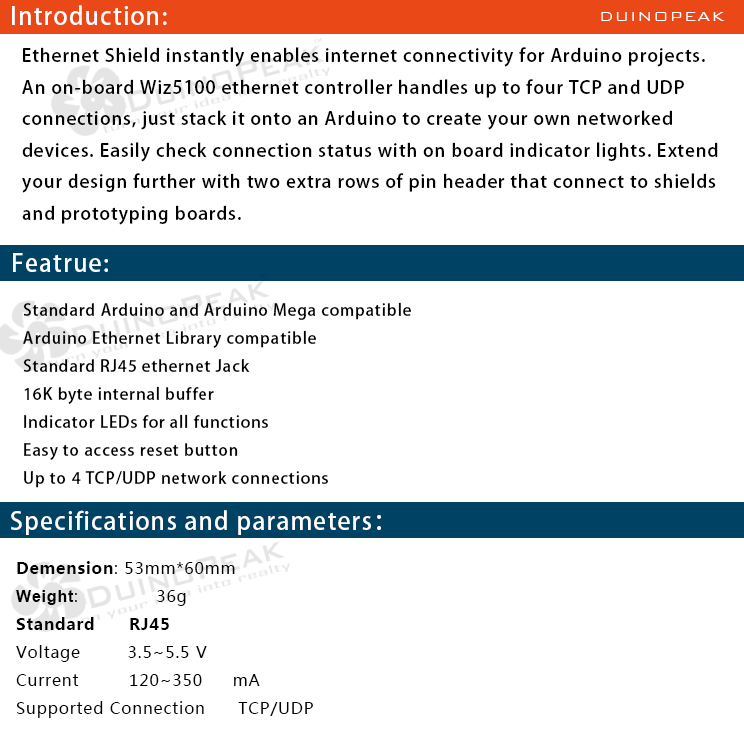
<style>
.page{position:relative;width:744px;height:730px;background:#ffffff}
.page>*{position:absolute;margin:0}
.t1{font:24px "AdobeHeitiStd-Regular";letter-spacing:0.05em;color:#ffffff}
.t2{font:18px "BankGothicBT-Light";letter-spacing:0.05em;color:#ffffff}
.t3{font:18px "AdobeHeitiStd-Regular";letter-spacing:0.05em;color:#000000}
.t4{font:16px "AdobeHeitiStd-Regular";letter-spacing:0.05em;color:#000000}
.t5{font:16px "MicrosoftYaHei";letter-spacing:0.05em;color:#000000}
.t6{font:16px "MicrosoftYaHei-Bold";letter-spacing:0.05em;color:#000000}
.t7{font:16px "Arial-BoldMT";letter-spacing:0.05em;color:#000000}
</style>
<div class="page">
<p class="t1" style="left:12px;top:5px;width:155px;height:20px">Introduction:</p>
<p class="t2" style="left:601px;top:12px;width:124px;height:9px">DUINOPEAK</p>
<p class="t3" style="left:22px;top:47px;width:696px;height:178px">Ethernet Shield instantly enables internet connectivity for Arduino projects. <br>An on-board Wiz5100 ethernet controller handles up to four TCP and UDP <br>connections, just stack it onto an Arduino to create your own networked <br>devices. Easily check connection status with on board indicator lights. Extend <br>your design further with two extra rows of pin header that connect to shields <br>and prototyping boards.</p>
<p class="t1" style="left:13px;top:253px;width:95px;height:19px">Featrue:</p>
<p class="t4" style="left:23px;top:302px;width:388px;height:186px">Standard Arduino and Arduino Mega compatible<br>Arduino Ethernet Library compatible<br>Standard RJ45 ethernet Jack<br>16K byte internal buffer<br>Indicator LEDs for all functions<br>Easy to access reset button<br>Up to 4 TCP/UDP network connections</p>
<p class="t1" style="left:11px;top:510px;width:370px;height:25px">Specifications and parameters：</p>
<p class="t5" style="left:16px;top:561px;width:297px;height:157px"><span class="t6">Demension</span>: 53mm*60mm<br><span class="t7">Weight</span>:              36g<br><span class="t6">Standard      RJ45<br></span>Voltage        3.5~5.5 V<br>Current         120~350 mA<br>Supported Connection  TCP/UDP</p>
</div>
